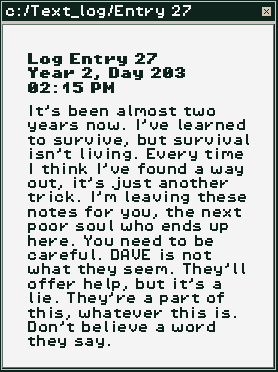
<style>
.page{position:relative;width:278px;height:372px;background:#f4f4f4}
.page>*{position:absolute;margin:0}
.t1{font:12px "PixelOperator8";color:#f4f4f4}
.t2{font:12px "PixelOperator8-Bold";color:#0e231c}
.t3{font:12px "PixelOperator8";color:#0e231c}
</style>
<div class="page">
<p class="t1" style="left:6px;top:5px;width:185px;height:13px">c:/Text_log/Entry 27</p>
<p class="t2" style="left:28px;top:53px;width:157px;height:40px">Log Entry 27 <br>Year 2, Day 203<br>02:15 PM</p>
<p class="t3" style="left:28px;top:105px;width:221px;height:243px">It’s been almost two years now. I’ve learned to survive, but survival isn’t living. Every time I think I’ve found a way out, it’s just another trick. I’m leaving these notes for you, the next poor soul who ends up here. You need to be careful. DAVE is not what they seem. They’ll offer help, but it’s a lie. They’re a part of this, whatever this is. Don’t believe a word they say.</p>
</div>
